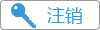
<style>
.page{position:relative;width:100px;height:30px;background:#ffffff}
.page>*{position:absolute;margin:0}
.t1{font:18px "MicrosoftYaHei";color:#3998d6}
</style>
<div class="page">
<p class="t1" style="left:47px;top:7px;width:35px;height:17px">注销</p>
</div>
